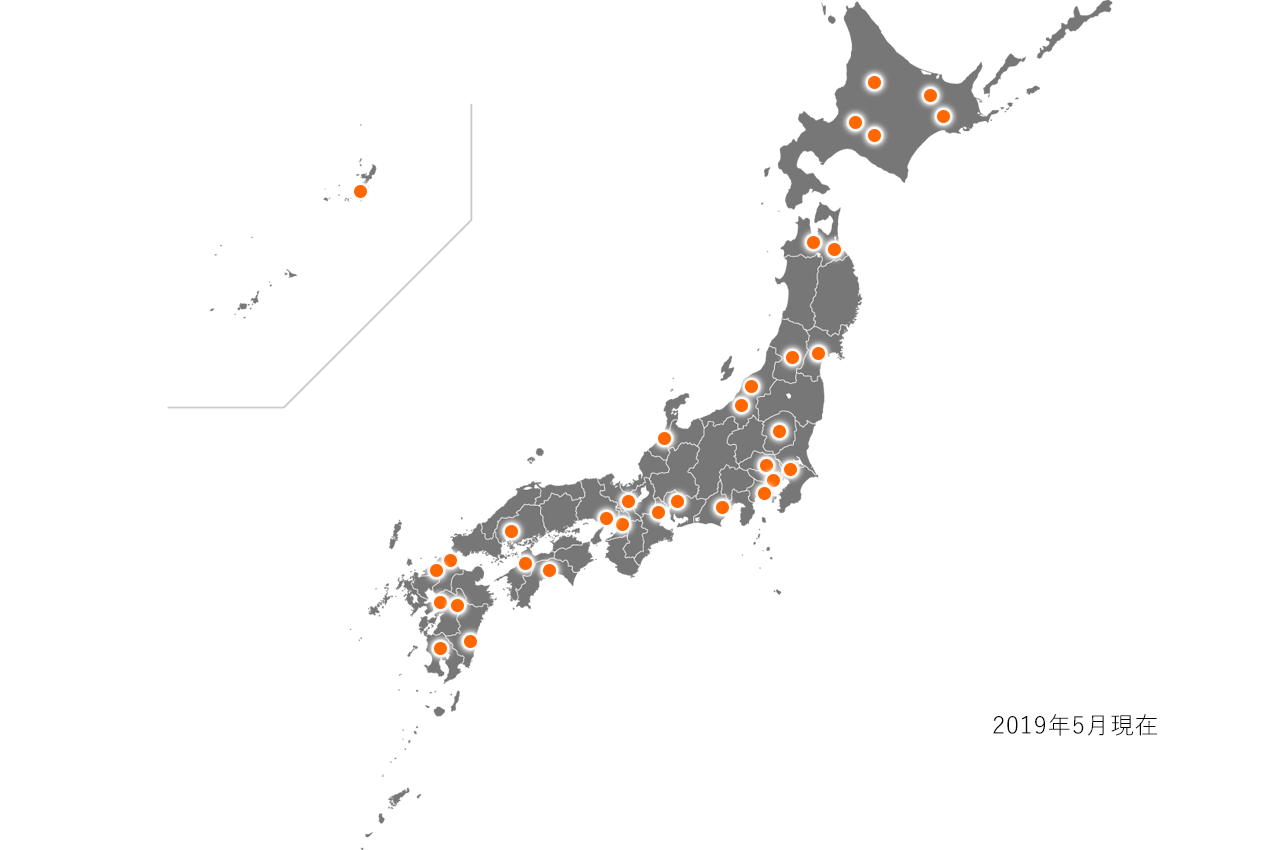
<style>
.page{position:relative;width:1280px;height:850px;background:#ffffff}
.page>*{position:absolute;margin:0}
.t1{font:24px "YuGothic-Regular";letter-spacing:0.02em;color:#030303}
</style>
<div class="page">
<p class="t1" style="left:993px;top:714px;width:164px;height:22px">2019年5月現在</p>
</div>
